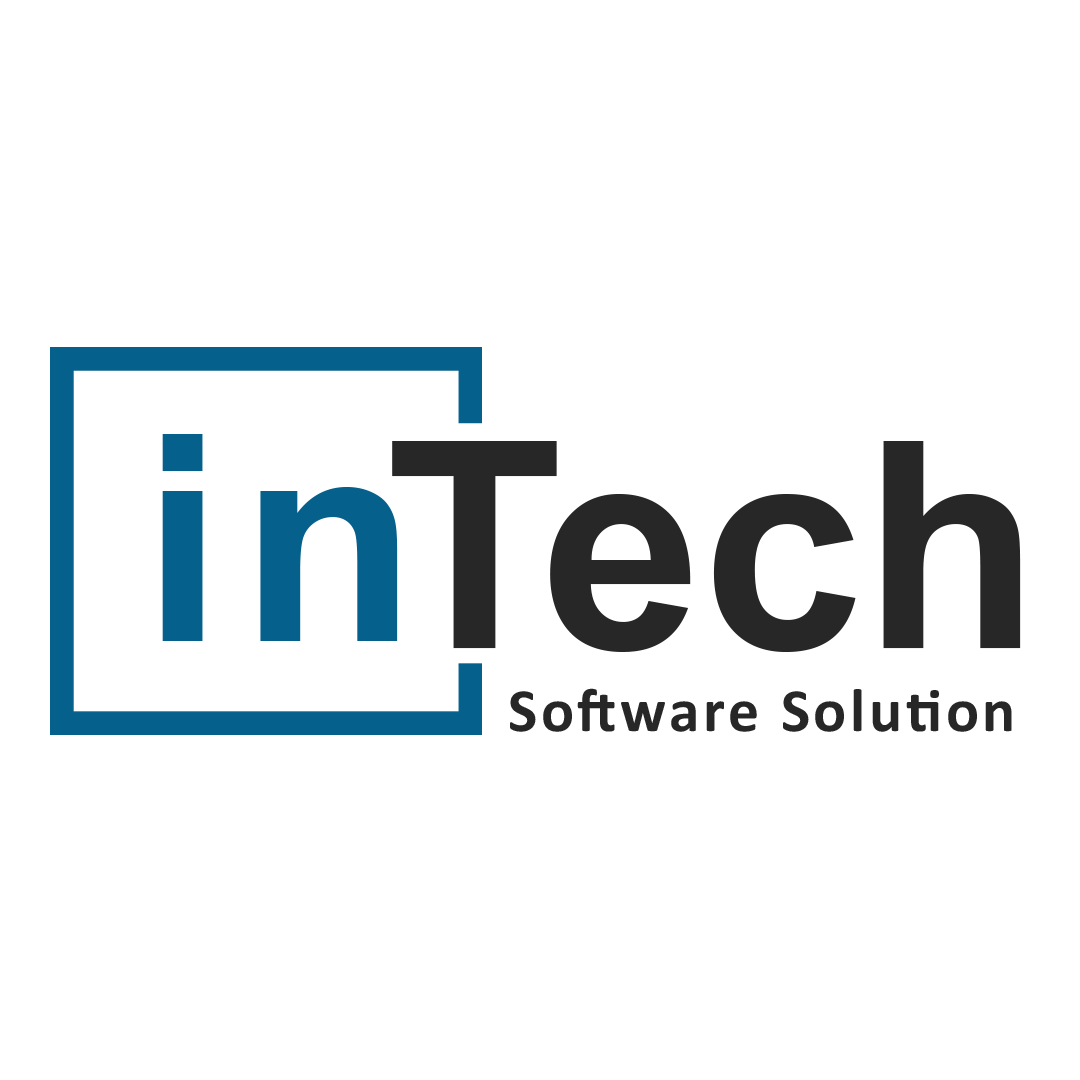
<style>
.page{position:relative;width:1080px;height:1080px;background:#ffffff}
.page>*{position:absolute;margin:0}
.t1{font:289.2px "Arial-BoldMT";letter-spacing:0.06em;color:#05608c}
.t2{font:289.2px "Arial-BoldMT";color:#272727}
.t3{font:61.6px "Calibri-Bold";letter-spacing:0.06em;color:#272727}
</style>
<div class="page">
<p class="t1" style="left:162px;top:434px;width:236px;height:207px">in</p>
<p class="t2" style="left:392px;top:441px;width:629px;height:211px">Tech</p>
<p class="t3" style="left:510px;top:688px;width:502px;height:44px">Software Solution</p>
</div>
